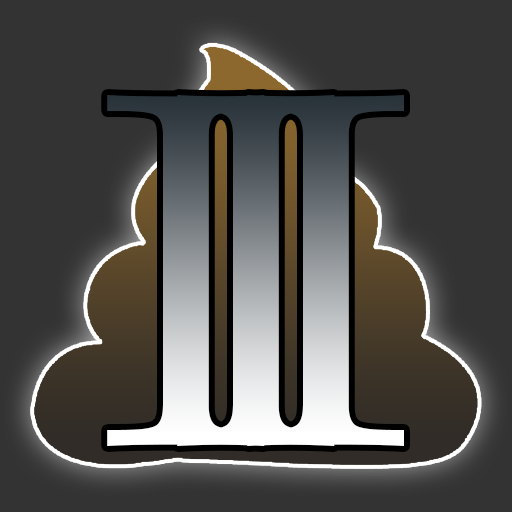
<style>
.page{position:relative;width:512px;height:512px;background:#333333}
.page>*{position:absolute;margin:0}
.t1{font:513.8px "CMUSerif-Roman";letter-spacing:-0.225em}
</style>
<div class="page">
<p class="t1" style="left:107px;top:95px;width:297px;height:351px">III</p>
</div>
